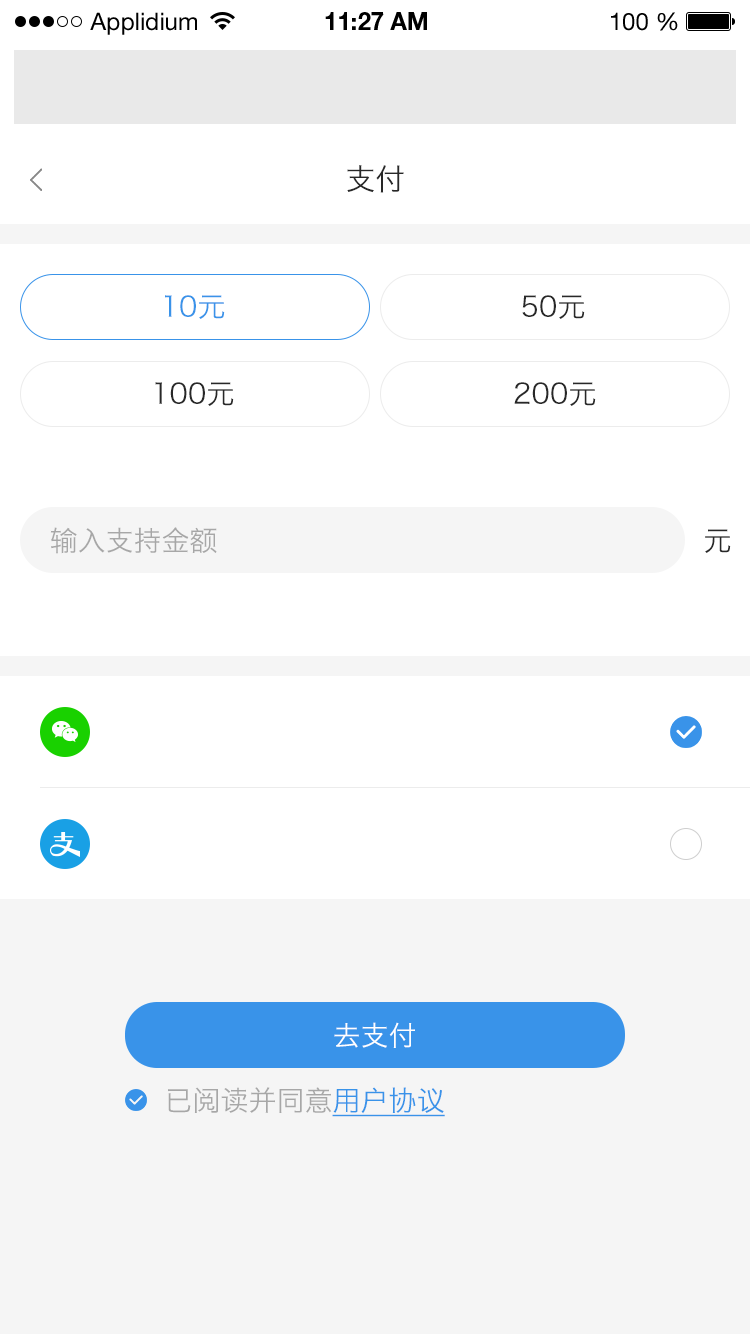
<style>
.page{position:relative;width:750px;height:1334px;background:#ffffff}
.page>*{position:absolute;margin:0}
.t1{font:24px "HelveticaNeueLTStd-Roman";color:#000000}
.t2{font:24px "HelveticaNeueLTStd-Bd";color:#000000}
.t3{font:30px "HiraginoSansGB-W3";color:#282828}
.t4{font:28px "HiraginoSansGB-W3";color:#3993e9}
.t5{font:28px "HiraginoSansGB-W3";color:#282828}
.t6{font:28px "HiraginoSansGB-W3";color:#a7a7a7}
.t7{font:28px "HiraginoSansGB-W3";color:#ffffff}
.t8{font:28px "HiraginoSansGB-W3";color:#3993e9;text-decoration:underline}
</style>
<div class="page">
<p class="t1" style="left:90px;top:12px;width:107px;height:23px">Applidium</p>
<p class="t2" style="left:325px;top:12px;width:102px;height:18px">11:27 AM</p>
<p class="t1" style="left:611px;top:12px;width:67px;height:19px">100 %</p>
<p class="t3" style="left:347px;top:165px;width:57px;height:28px">支付</p>
<p class="t4" style="left:165px;top:295px;width:60px;height:24px">10元</p>
<p class="t5" style="left:522px;top:295px;width:63px;height:24px">50元</p>
<p class="t5" style="left:155px;top:382px;width:79px;height:24px">100元</p>
<p class="t5" style="left:514px;top:382px;width:82px;height:24px">200元</p>
<p class="t6" style="left:50px;top:527px;width:167px;height:27px">输入支持金额</p>
<p class="t5" style="left:705px;top:529px;width:26px;height:24px">元</p>
<p class="t7" style="left:334px;top:1022px;width:81px;height:26px">去支付</p>
<p class="t6" style="left:168px;top:1087px;width:277px;height:30px">已阅读并同意<span class="t8">用户协议</span></p>
</div>
